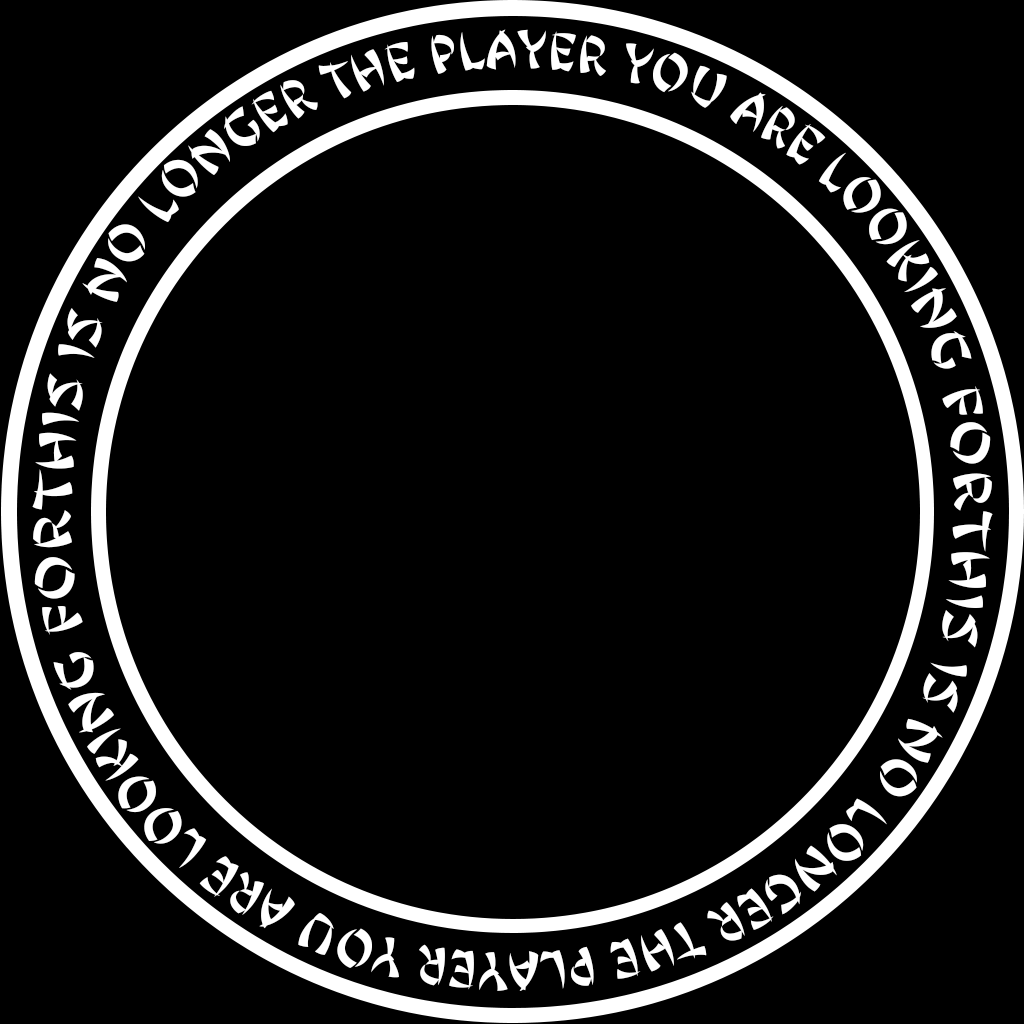
<style>
.page{position:relative;width:1024px;height:1024px;background:#000000}
.page>*{position:absolute;margin:0}
.t1{font:47.4px "JingJing";color:#ffffff;scale:0.62 1}
</style>
<div class="page">
<p class="t1" style="left:32px;top:29px;width:960px;height:482px;text-align:center">THIS IS NO LONGER THE PLAYER YOU ARE LOOKING FOR</p>
<p class="t1" style="left:33px;top:510px;width:960px;height:481px;rotate:180deg">THIS IS NO LONGER THE PLAYER YOU ARE LOOKING FOR</p>
</div>
